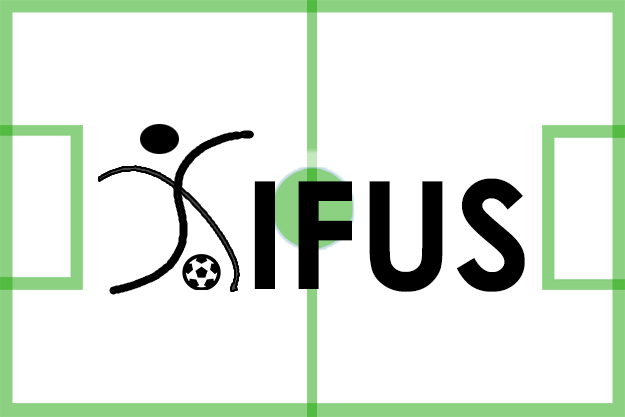
<style>
.page{position:relative;width:625px;height:417px;background:#ffffff}
.page>*{position:absolute;margin:0}
.t1{font:150px "CenturyGothic-Bold";color:#000000}
</style>
<div class="page">
<p class="t1" style="left:254px;top:178px;width:271px;height:114px">IFUS</p>
</div>
